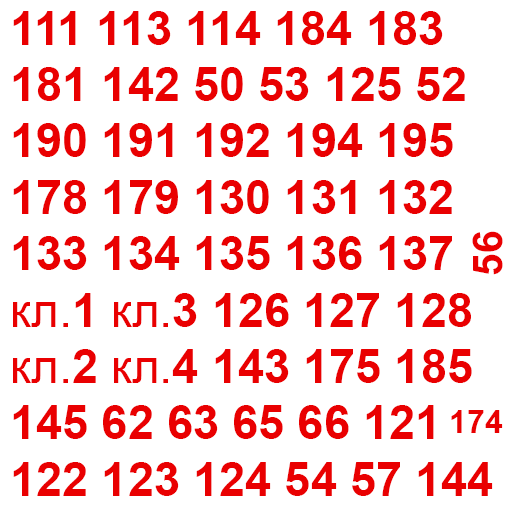
<style>
.page{position:relative;width:512px;height:512px;background:#ffffff}
.page>*{position:absolute;margin:0}
.t1{font:47px "Arial-BoldMT";color:#e90001}
.t2{font:47px "ArialMT";color:#e90001}
.t3{font:41.2px "Arial-BoldMT";color:#e90001}
.t4{font:32px "Arial-BoldMT";color:#e90001}
</style>
<div class="page">
<p class="t1" style="left:13px;top:11px;width:480px;height:485px">111 113 114 184 183 181 142 50 53 125 52 190 191 192 194 195 178 179 130 131 132 133 134 135 136 137 <span class="t2">кл.</span>1 <span class="t2">кл.</span>3 126 127 128<br><span class="t2">кл.</span>2 <span class="t2">кл.</span>4 143 175 185 145 62 63 65 66 121 122 123 124 54 57 144</p>
<p class="t3" style="left:472px;top:231px;width:31px;height:44px;rotate:-90deg">56</p>
<p class="t4" style="left:451px;top:410px;width:52px;height:23px">174</p>
</div>
